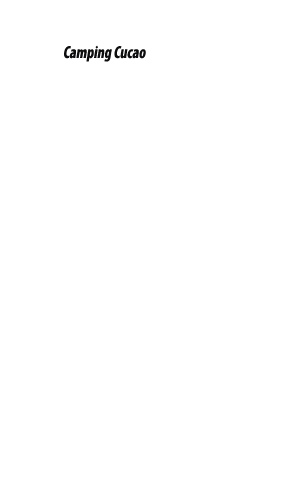
<style>
.page{position:relative;width:300px;height:500px;background:#ffffff}
.page>*{position:absolute;margin:0}
.t1{font:17.4px "MyriadPro-BoldCond";color:#0e0d0f;font-style:italic;scale:0.9 1}
</style>
<div class="page">
<p class="t1" style="left:64px;top:45px;width:82px;height:17px">Camping Cucao</p>
</div>
